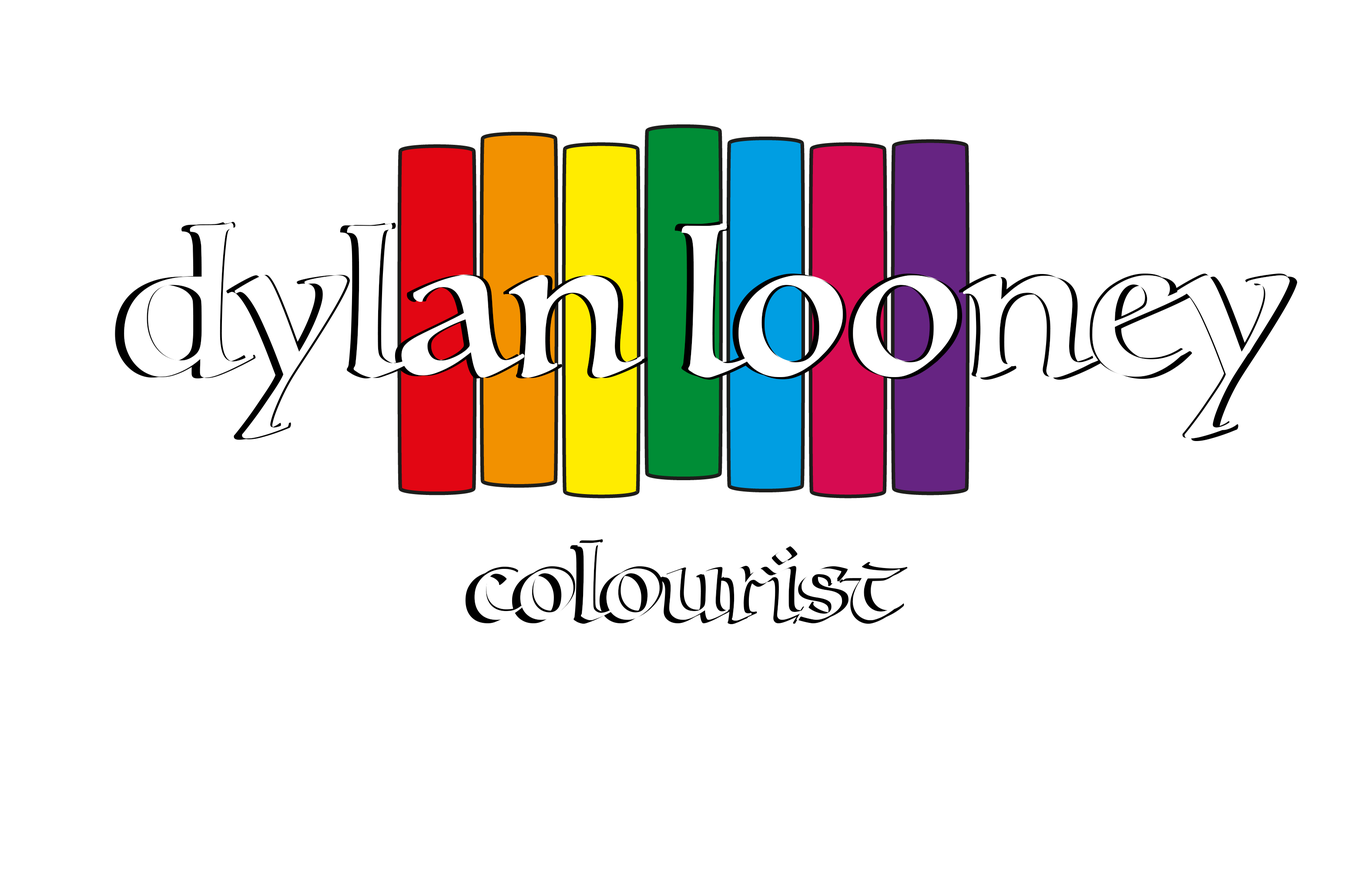
<style>
.page{position:relative;width:1372px;height:869px;background:#ffffff}
.page>*{position:absolute;margin:0}
.t1{font:199.4px "Luminari-Regular";color:#ffffff}
.t2{font:103.3px "Luminari-Regular"}
</style>
<div class="page">
<p class="t1" style="left:124px;top:223px;width:1166px;height:216px">dylan looney</p>
<p class="t2" style="left:465px;top:544px;width:433px;height:80px">colourist</p>
</div>
